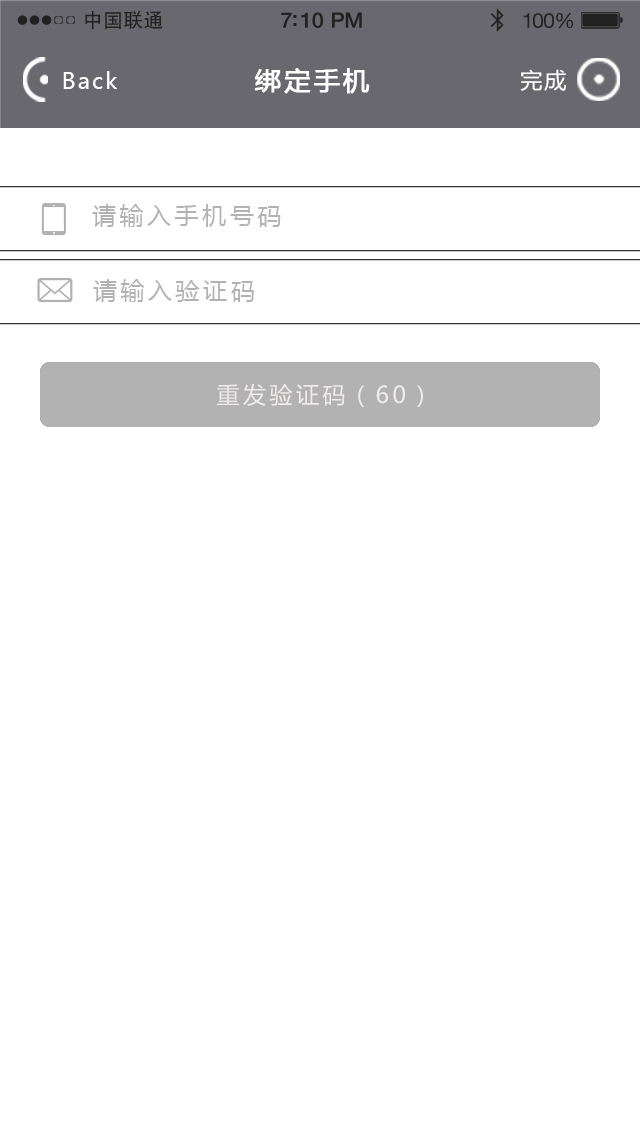
<style>
.page{position:relative;width:640px;height:1136px;background:#ffffff}
.page>*{position:absolute;margin:0}
.t1{font:19.7px "AdobeHeitiStd-Regular";letter-spacing:0.02em;color:#212121}
.t2{font:21.4px "HelveticaNeue-Medium";letter-spacing:-0.02em;color:#212121}
.t3{font:20.6px "HelveticaNeue";letter-spacing:-0.02em;color:#212121}
.t4{font:22px "MicrosoftYaHei";letter-spacing:0.1em;color:#ffffff}
.t5{font:26px "MicrosoftYaHei";letter-spacing:0.1em;color:#ffffff;font-weight:bold}
.t6{font:24px "MicrosoftYaHei";letter-spacing:0.15em;color:#b2b2b2}
.t7{font:23px "MicrosoftYaHei";letter-spacing:0.15em;color:#f0ecec}
</style>
<div class="page">
<p class="t1" style="left:85px;top:10px;width:78px;height:20px">中国联通</p>
<p class="t2" style="left:281px;top:12px;width:81px;height:16px">7:10 PM</p>
<p class="t3" style="left:523px;top:13px;width:50px;height:16px">100%</p>
<p class="t4" style="left:63px;top:71px;width:55px;height:18px">Back</p>
<p class="t5" style="left:254px;top:68px;width:116px;height:26px">绑定手机</p>
<p class="t4" style="left:520px;top:69px;width:46px;height:22px">完成</p>
<p class="t6" style="left:92px;top:204px;width:189px;height:23px">请输入手机号码</p>
<p class="t6" style="left:93px;top:279px;width:161px;height:23px">请输入验证码</p>
<p class="t7" style="left:217px;top:383px;width:206px;height:24px">重发验证码（60）</p>
</div>
